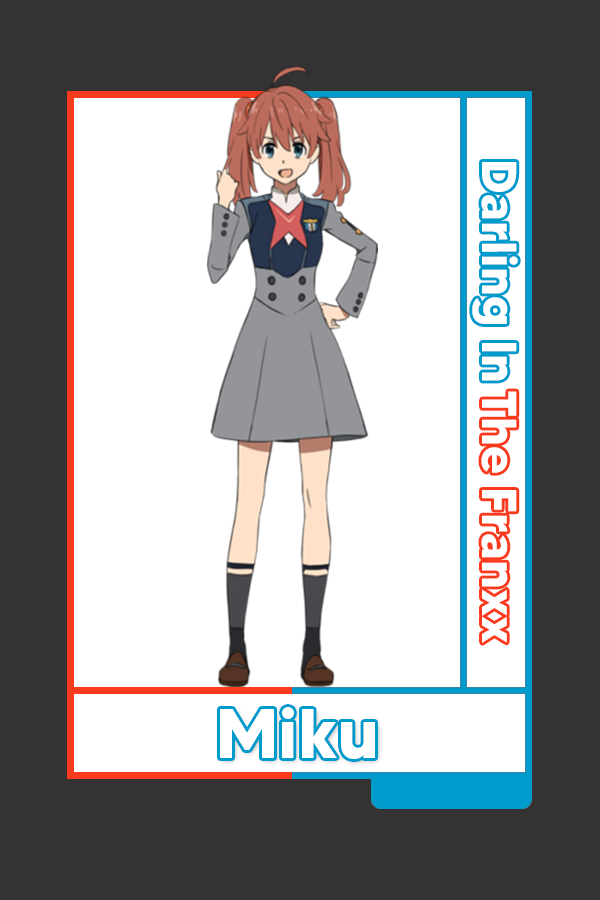
<style>
.page{position:relative;width:600px;height:900px;background:#ffffff}
.page>*{position:absolute;margin:0}
.t1{font:48.8px "MADETOMMY-Bold";color:#ffffff}
.t2{font:70.1px "MADETOMMY-Bold";color:#ffffff}
</style>
<div class="page">
<p class="t1" style="left:472px;top:162px;width:46px;height:219px;rotate:90deg">Darling In</p>
<p class="t1" style="left:481px;top:391px;width:36px;height:252px;rotate:90deg">The Franxx</p>
<p class="t2" style="left:220px;top:707px;width:155px;height:52px">Miku</p>
</div>
